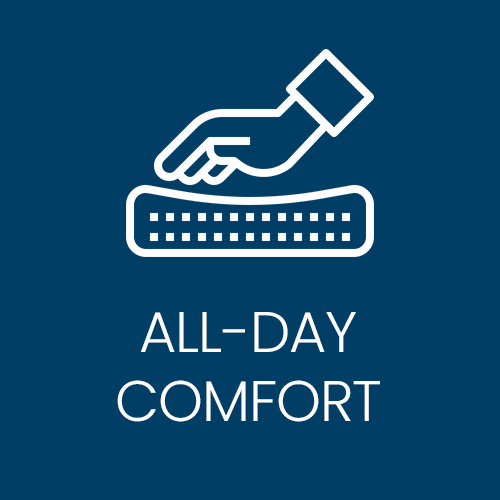
<style>
.page{position:relative;width:500px;height:500px;background:#003e65}
.page>*{position:absolute;margin:0}
.t1{font:57.2px "Poppins-Light";letter-spacing:-0.02em;color:#ffffff;text-transform:uppercase}
</style>
<div class="page">
<p class="t1" style="left:117px;top:312px;width:263px;height:110px;text-align:center">All-day<br>comfort</p>
</div>
